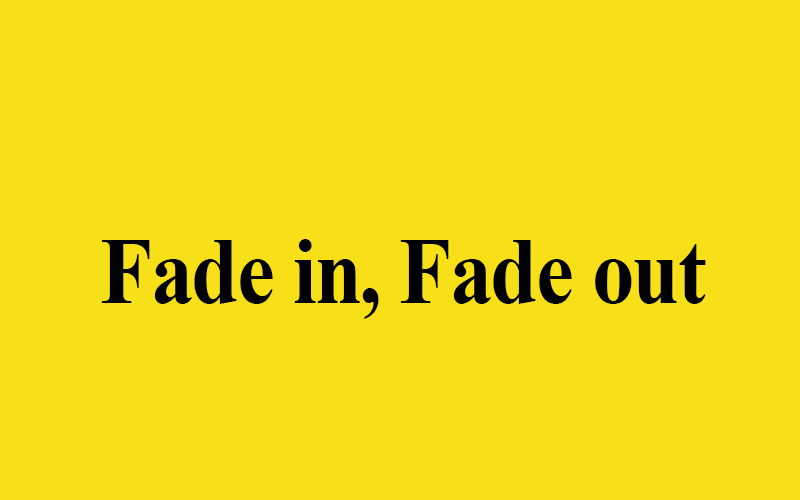
<style>
.page{position:relative;width:800px;height:500px;background:#f7e018}
.page>*{position:absolute;margin:0}
.t1{font:94.5px "TimesNewRomanPS-BoldMT";letter-spacing:-0.02em;color:#000000;scale:0.9 1}
</style>
<div class="page">
<p class="t1" style="left:101px;top:239px;width:605px;height:80px">Fade in, Fade out</p>
</div>
